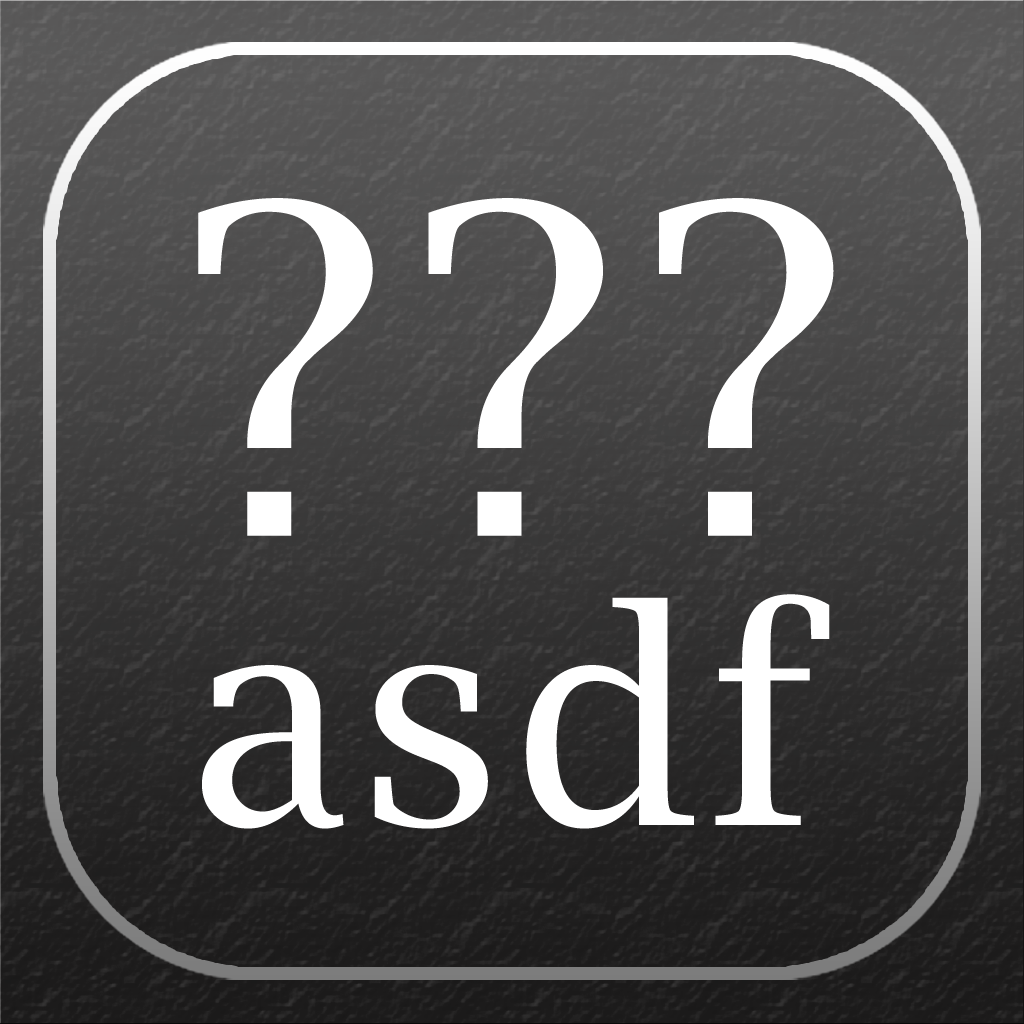
<style>
.page{position:relative;width:1024px;height:1024px}
.page>*{position:absolute;margin:0}
.t1{font:455.7px "LucidaBright";letter-spacing:0.025em;color:#ffffff}
.t2{font:294.4px "LucidaBright";letter-spacing:0.025em;color:#ffffff}
</style>
<div class="page">
<p class="t1" style="left:198px;top:198px;width:636px;height:338px">???</p>
<p class="t2" style="left:202px;top:594px;width:628px;height:235px">asdf</p>
</div>
